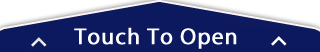
<style>
.page{position:relative;width:320px;height:52px;background:#0d195f}
.page>*{position:absolute;margin:0}
.t1{font:23px "MyriadPro-Regular";letter-spacing:0.03em;color:#ffffff;font-weight:bold}
</style>
<div class="page">
<p class="t1" style="left:74px;top:27px;width:163px;height:22px">Touch To Open</p>
</div>
